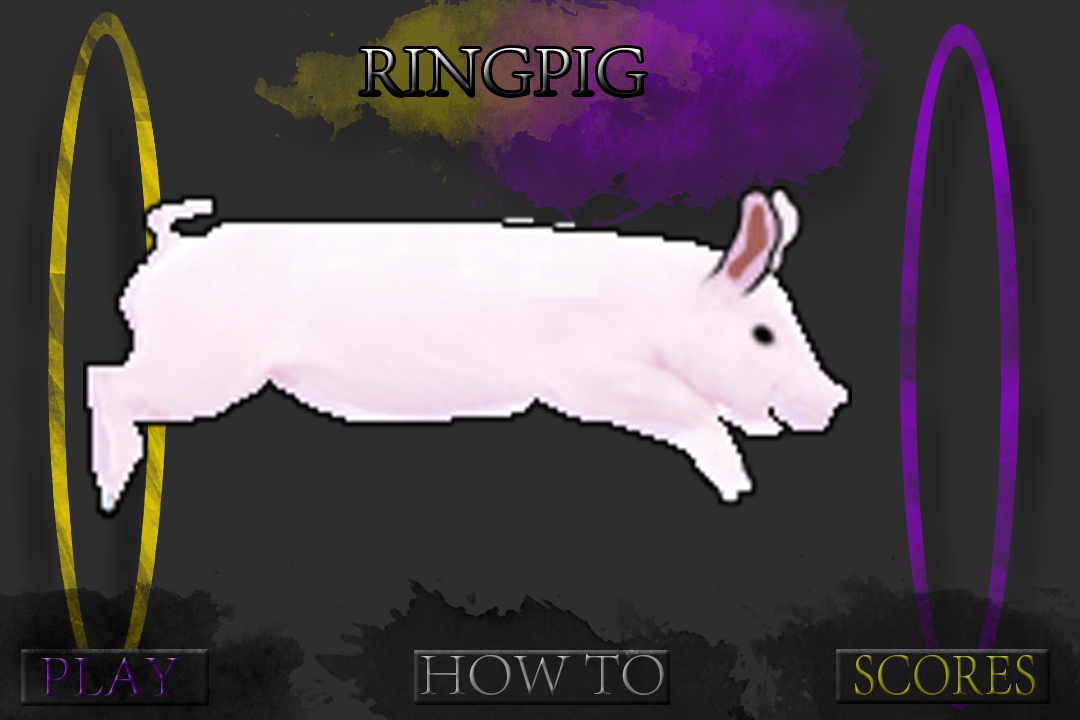
<style>
.page{position:relative;width:1080px;height:720px;background:#2e2e2e}
.page>*{position:absolute;margin:0}
.t1{font:72px "AdobeSongStd-Light"}
.t2{font:60px "AdobeSongStd-Light"}
.t3{font:60px "AdobeSongStd-Light";scale:0.86 1}
</style>
<div class="page">
<p class="t1" style="left:361px;top:48px;width:285px;height:47px">RINGPIG</p>
<p class="t2" style="left:421px;top:654px;width:243px;height:41px">HOW TO</p>
<p class="t2" style="left:41px;top:657px;width:140px;height:39px">PLAY</p>
<p class="t3" style="left:855px;top:655px;width:180px;height:40px">SCORES</p>
</div>
